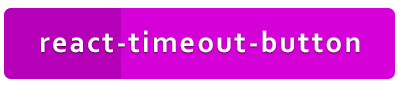
<style>
.page{position:relative;width:399px;height:88px;background:#d500d8}
.page>*{position:absolute;margin:0}
.t1{font:30px "Corbel-Bold";letter-spacing:0.075em;color:#ffffff}
</style>
<div class="page">
<p class="t1" style="left:41px;top:30px;width:319px;height:23px">react-timeout-button</p>
</div>
